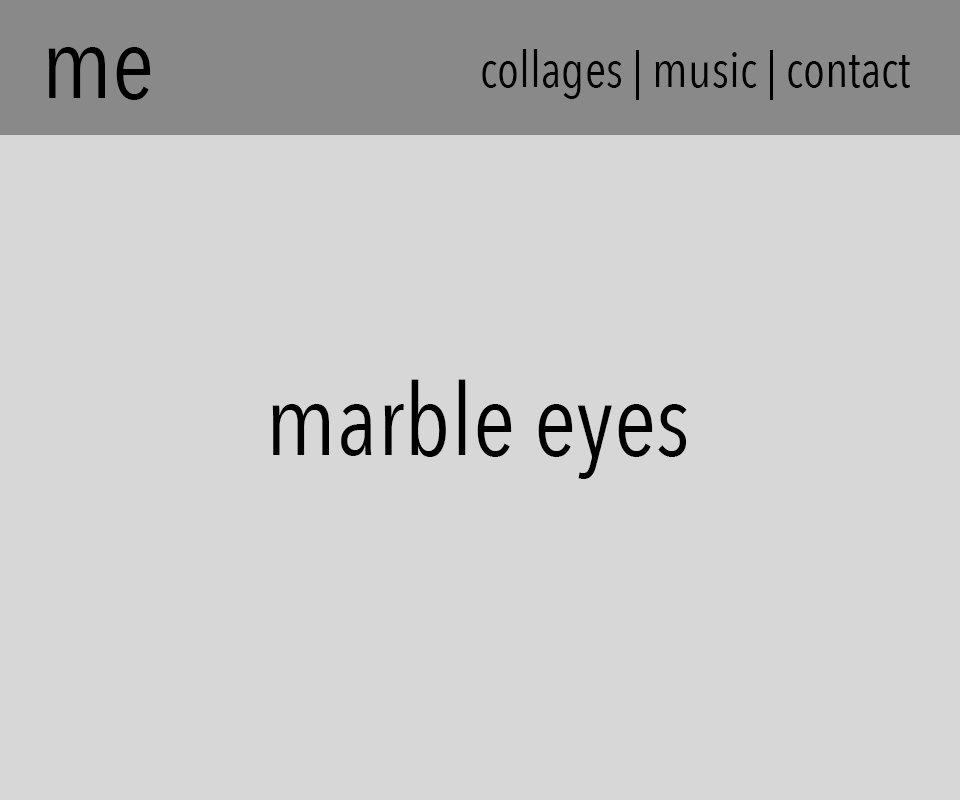
<style>
.page{position:relative;width:960px;height:800px;background:#d7d7d7}
.page>*{position:absolute;margin:0}
.t1{font:100px "AvenirNextCondensed-Regular";color:#000000}
.t2{font:50px "AvenirNextCondensed-Regular";color:#000000}
</style>
<div class="page">
<p class="t1" style="left:48px;top:47px;width:103px;height:53px">me</p>
<p class="t2" style="left:482px;top:49px;width:428px;height:51px">collages | music | contact</p>
<p class="t1" style="left:272px;top:379px;width:415px;height:100px">marble eyes</p>
</div>
